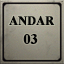
<style>
.page{position:relative;width:64px;height:64px}
.page>*{position:absolute;margin:0}
.t1{font:12.7px "TimesNewRomanPS-BoldMT";letter-spacing:0.005em;color:#040404;text-transform:uppercase;font-weight:bold;scale:0.95 1}
.t2{font:14.3px "TimesNewRomanPS-BoldMT";letter-spacing:0.005em;color:#040404;text-transform:uppercase;font-weight:bold;scale:0.97 1}
</style>
<div class="page">
<p class="t1" style="left:9px;top:16px;width:46px;height:10px">andar</p>
<p class="t2" style="left:23px;top:34px;width:15px;height:10px">03</p>
</div>
